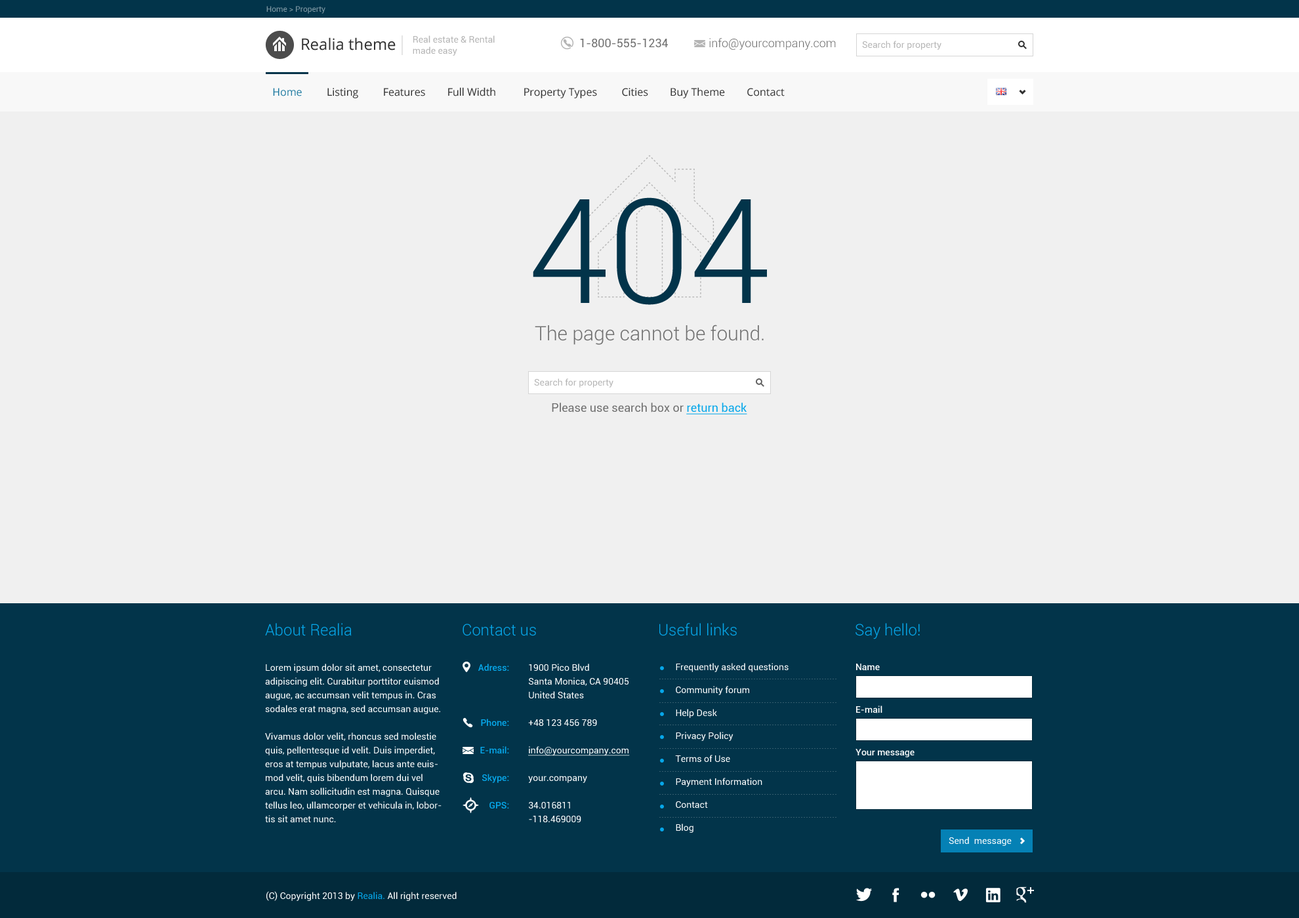
<style>
.page{position:relative;width:1299px;height:918px;background:#f0f0f0}
.page>*{position:absolute;margin:0}
.t1{font:7.9px "Roboto-Regular";color:#819aa5}
.t2{font:15.7px "OpenSans";color:#313131}
.t3{font:9.2px "Roboto-Regular";color:#b5b5b5}
.t4{font:11.8px "Roboto-Regular";color:#707070}
.t5{font:11.8px "Roboto-Light";color:#707070}
.t6{font:10.5px "OpenSans";color:#313131}
.t7{font:10.5px "OpenSans";color:#1d79a0}
.t8{font:145.6px "Roboto-Light";color:#02344a}
.t9{font:19.7px "Roboto-Light";color:#707070}
.t10{font:11.8px "Roboto-Regular";color:#06a7ea;text-decoration:underline}
.t11{font:15.7px "Roboto-Light";color:#06a7ea}
.t12{font:9.2px/13.8px "Roboto-Regular";color:#ffffff}
.t13{font:9.2px/13.8px "Roboto-Medium";color:#06a7ea}
.t14{font:9.2px/13.8px "Roboto-Regular";color:#ffffff;text-decoration:underline}
.t15{font:9.2px/23px "Roboto-Regular";color:#ffffff}
.t16{font:9.2px "Roboto-Medium";color:#ffffff}
.t17{font:9.2px "Roboto-Regular";color:#ffffff}
.t18{font:9.2px "Roboto-Regular";color:#06a7ea}
</style>
<div class="page">
<p class="t1" style="left:266px;top:6px;width:59px;height:8px">Home &gt; Property</p>
<p class="t2" style="left:302px;top:37px;width:93px;height:14px">Realia theme</p>
<p class="t3" style="left:413px;top:35px;width:82px;height:21px">Real estate &amp; Rental<br>made easy</p>
<p class="t4" style="left:580px;top:39px;width:88px;height:9px">1-800-555-1234</p>
<p class="t5" style="left:709px;top:38px;width:127px;height:12px">info@yourcompany.com</p>
<p class="t3" style="left:862px;top:41px;width:79px;height:9px">Search for property</p>
<p class="t6" style="left:273px;top:87px;width:511px;height:11px"><span class="t7">Home         </span>Listing         Features        Full Width          Property Types         Cities        Buy Theme        Contact</p>
<p class="t8" style="left:533px;top:197px;width:234px;height:108px">404</p>
<p class="t9" style="left:535px;top:325px;width:228px;height:20px">The page cannot be found.</p>
<p class="t3" style="left:534px;top:378px;width:79px;height:10px">Search for property</p>
<p class="t4" style="left:552px;top:403px;width:195px;height:12px">Please use search box or <span class="t10">return back</span></p>
<p class="t11" style="left:265px;top:623px;width:87px;height:13px">About Realia</p>
<p class="t11" style="left:462px;top:624px;width:74px;height:12px">Contact us</p>
<p class="t11" style="left:659px;top:623px;width:78px;height:13px">Useful links</p>
<p class="t11" style="left:855px;top:623px;width:65px;height:16px">Say hello!</p>
<p class="t12" style="left:265px;top:664px;width:176px;height:159px">Lorem ipsum dolor sit amet, consectetur adipiscing elit. Curabitur porttitor euismod augue, ac accumsan velit tempus in. Cras sodales erat magna, sed accumsan augue. <br><br>Vivamus dolor velit, rhoncus sed molestie quis, pellentesque id velit. Duis imperdiet, eros at tempus vulputate, lacus ante euismod velit, quis bibendum lorem dui vel arcu. Nam sollicitudin est magna. Quisque tellus leo, ullamcorper et vehicula in, lobortis sit amet nunc.</p>
<p class="t13" style="left:478px;top:664px;width:31px;height:145px;text-align:right">Adress:<br><br><br><br>Phone:<br><br>E-mail:<br><br>Skype:<br><br>GPS:</p>
<p class="t12" style="left:528px;top:664px;width:102px;height:158px">1900 Pico Blvd<br>Santa Monica, CA 90405<br>United States<br><br>+48 123 456 789<br><br><span class="t14">info@yourcompany.com<br><br></span>your.company<br><br>34.016811<br>-118.469009</p>
<p class="t15" style="left:675px;top:663px;width:113px;height:170px">Frequently asked questions<br>Community forum<br>Help Desk<br>Privacy Policy<br>Terms of Use<br>Payment Information<br>Contact <br>Blog</p>
<p class="t16" style="left:856px;top:664px;width:24px;height:7px">Name</p>
<p class="t16" style="left:856px;top:706px;width:26px;height:8px">E-mail</p>
<p class="t16" style="left:855px;top:749px;width:59px;height:9px">Your message</p>
<p class="t17" style="left:948px;top:837px;width:63px;height:9px">Send  message</p>
<p class="t17" style="left:266px;top:891px;width:190px;height:10px">(C) Copyright 2013 by <span class="t18">Realia. </span>All right reserved</p>
</div>
